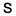
<style>
.page{position:relative;width:16px;height:16px;background:#ffffff}
.page>*{position:absolute;margin:0}
.t1{font:14px "ArialMT";letter-spacing:0.025em;color:#010000}
</style>
<div class="page">
<p class="t1" style="left:3px;top:2px;width:9px;height:12px">S</p>
</div>
